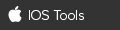
<style>
.page{position:relative;width:120px;height:30px;background:#333333}
.page>*{position:absolute;margin:0}
.t1{font:14px "ProximaNova-Light";color:#ffffff}
</style>
<div class="page">
<p class="t1" style="left:29px;top:10px;width:55px;height:10px">IOS Tools</p>
</div>
